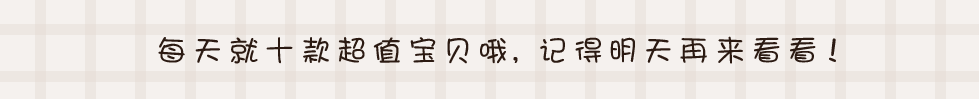
<style>
.page{position:relative;width:979px;height:99px;background:#f5f1ee}
.page>*{position:absolute;margin:0}
.t1{font:30px "DFPShaoNvW5";color:#2b1a12}
</style>
<div class="page">
<p class="t1" style="left:158px;top:36px;width:678px;height:28px">每天就十款超值宝贝哦，记得明天再来看看！</p>
</div>
